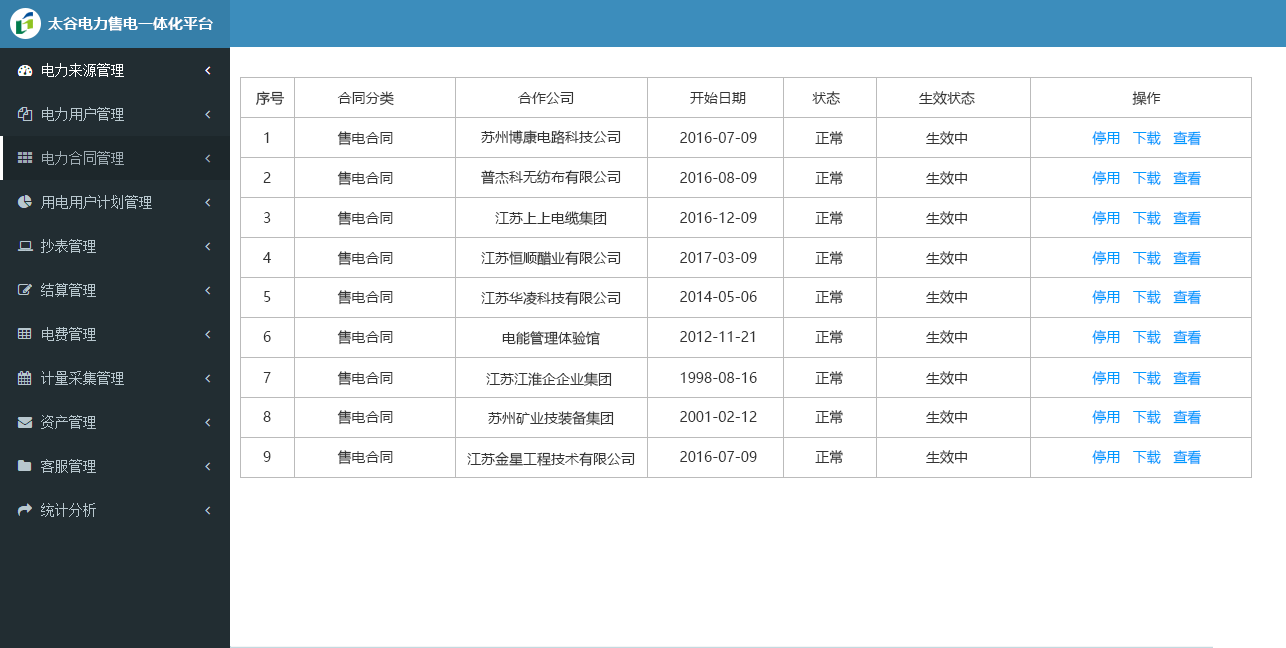
<style>
.page{position:relative;width:1286px;height:648px;background:#ffffff}
.page>*{position:absolute;margin:0}
.t1{font:15px "MicrosoftYaHei-Bold";color:#ffffff}
.t2{font:14px "MicrosoftYaHei";color:#333333}
.t3{font:14px "MicrosoftYaHei";color:#0099ff}
</style>
<div class="page">
<p class="t1" style="left:48px;top:16px;width:165px;height:15px">太谷电力售电一体化平台</p>
<p class="t2" style="left:256px;top:91px;width:905px;height:15px">序号             合同分类                              合作公司                            开始日期                状态                   生效状态                                      操作</p>
<p class="t2" style="left:264px;top:131px;width:938px;height:15px">1                售电合同                                                                     2016-07-09              正常                    生效中                              <span class="t3">停用   下载   查看</span></p>
<p class="t2" style="left:481px;top:130px;width:140px;height:15px">苏州博康电路科技公司</p>
<p class="t2" style="left:263px;top:171px;width:939px;height:15px">2                售电合同                                                                     2016-08-09              正常                    生效中                              <span class="t3">停用   下载   查看</span></p>
<p class="t2" style="left:481px;top:170px;width:140px;height:15px">普杰科无纺布有限公司</p>
<p class="t2" style="left:263px;top:211px;width:939px;height:15px">3                售电合同                                                                     2016-12-09              正常                    生效中                              <span class="t3">停用   下载   查看</span></p>
<p class="t2" style="left:495px;top:211px;width:112px;height:15px">江苏上上电缆集团</p>
<p class="t2" style="left:263px;top:251px;width:939px;height:15px">4                售电合同                                                                     2017-03-09              正常                    生效中                              <span class="t3">停用   下载   查看</span></p>
<p class="t2" style="left:481px;top:251px;width:140px;height:15px">江苏恒顺醋业有限公司</p>
<p class="t2" style="left:264px;top:290px;width:938px;height:15px">5                售电合同                                                                     2014-05-06              正常                    生效中                              <span class="t3">停用   下载   查看</span></p>
<p class="t2" style="left:481px;top:291px;width:140px;height:15px">江苏华凌科技有限公司</p>
<p class="t2" style="left:263px;top:330px;width:939px;height:15px">6                售电合同                                                                     2012-11-21              正常                    生效中                              <span class="t3">停用   下载   查看</span></p>
<p class="t2" style="left:502px;top:331px;width:98px;height:15px">电能管理体验馆</p>
<p class="t2" style="left:263px;top:371px;width:939px;height:15px">7                售电合同                                                                     1998-08-16              正常                    生效中                              <span class="t3">停用   下载   查看</span></p>
<p class="t2" style="left:486px;top:372px;width:126px;height:15px">江苏江淮企企业集团</p>
<p class="t2" style="left:263px;top:410px;width:939px;height:15px">8                售电合同                                                                     2001-02-12              正常                    生效中                              <span class="t3">停用   下载   查看</span></p>
<p class="t2" style="left:488px;top:411px;width:126px;height:15px">苏州矿业技装备集团</p>
<p class="t2" style="left:263px;top:450px;width:939px;height:15px">9                售电合同                                                                     2016-07-09              正常                    生效中                              <span class="t3">停用   下载   查看</span></p>
<p class="t2" style="left:467px;top:452px;width:168px;height:15px">江苏金星工程技术有限公司</p>
</div>
